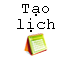
<style>
.page{position:relative;width:71px;height:58px;background:#ffffff}
.page>*{position:absolute;margin:0}
.t1{font:12px/16px "CourierNewPSMT";color:#000000}
</style>
<div class="page">
<p class="t1" style="left:17px;top:4px;width:38px;height:28px;text-align:center">Tạo<br>lịch</p>
</div>
